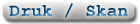
<style>
.page{position:relative;width:140px;height:24px}
.page>*{position:absolute;margin:0}
.t1{font:18px "CourierNewPS-BoldMT"}
</style>
<div class="page">
<p class="t1" style="left:9px;top:3px;width:119px;height:15px">Druk / Skan</p>
</div>
